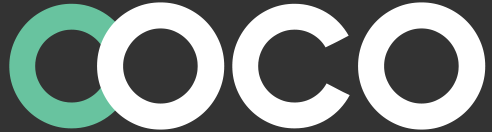
<style>
.page{position:relative;width:492px;height:132px;background:#333333}
.page>*{position:absolute;margin:0}
.t1{font:172px "COUTURE-Bold";color:#ffffff}
.t2{font:172px "COUTURE-Bold";letter-spacing:-0.22em;color:#68c39f}
</style>
<div class="page">
<p class="t1" style="left:9px;top:2px;width:477px;height:128px"><span class="t2">C</span>OCO</p>
</div>
